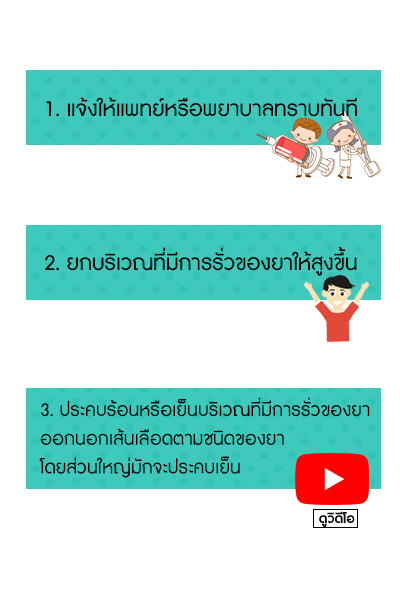
<style>
.page{position:relative;width:400px;height:600px;background:#ffffff}
.page>*{position:absolute;margin:0}
.t1{font:28px "DBAdmanX";color:#000000}
.t2{font:24px "DBAdmanX";color:#000000}
.t3{font:16.9px "DBAdmanX-Bold";color:#000000}
</style>
<div class="page">
<p class="t1" style="left:46px;top:97px;width:311px;height:20px">1. แจ้งให้แพทย์หรือพยาบาลทราบทันที</p>
<p class="t1" style="left:45px;top:247px;width:312px;height:29px">2. ยกบริเวณที่มีการรั่วของยาให้สูงขึ้น</p>
<p class="t2" style="left:39px;top:397px;width:331px;height:81px">3. ประคบร้อนหรือเย็นบริเวณที่มีการรั่วของยา<br>ออกนอกเส้นเลือดตามชนิดของยา <br>โดยส่วนใหญ่มักจะประคบเย็น</p>
<p class="t3" style="left:319px;top:511px;width:36px;height:16px">ดูวิดีโอ</p>
</div>
